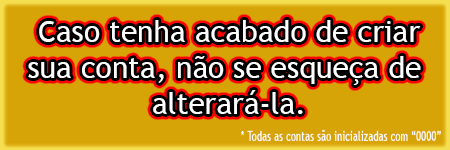
<style>
.page{position:relative;width:450px;height:150px;background:#d7a408}
.page>*{position:absolute;margin:0}
.t1{font:30px "TrebuchetMS";color:#ffffff}
</style>
<div class="page">
<p class="t1" style="left:28px;top:20px;width:393px;height:94px;text-align:center">Caso tenha acabado de criar<br>sua conta, não se esqueça de <br>alterará-la.</p>
</div>
